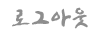
<style>
.page{position:relative;width:100px;height:38px;background:#ffffff}
.page>*{position:absolute;margin:0}
.t1{font:23.8px "JShinYeongBok-Regular";color:#8e8e8e}
</style>
<div class="page">
<p class="t1" style="left:12px;top:7px;width:76px;height:22px">로그아웃</p>
</div>
